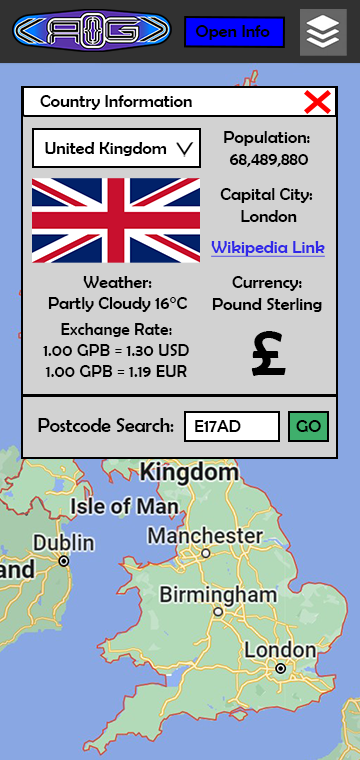
<style>
.page{position:relative;width:360px;height:760px;background:#d2d2d2}
.page>*{position:absolute;margin:0}
.t1{font:18px "BerlinSansFB-Reg";color:#000000}
.t2{font:18px "BerlinSansFB-Reg";color:#3128e8;text-decoration:underline}
.t3{font:17.4px "BerlinSansFB-Reg";color:#000000}
.t4{font:73.8px "BerlinSansFB-Reg";color:#000000}
.t5{font:19.7px "BerlinSansFB-Reg";color:#000000}
</style>
<div class="page">
<p class="t1" style="left:195px;top:25px;width:75px;height:15px">Open Info</p>
<p class="t1" style="left:40px;top:95px;width:152px;height:15px">Country Information</p>
<p class="t1" style="left:224px;top:131px;width:86px;height:36px;text-align:center">Population: <br>68,489,880</p>
<p class="t1" style="left:45px;top:142px;width:122px;height:14px">United Kingdom</p>
<p class="t1" style="left:220px;top:188px;width:93px;height:34px;text-align:center">Capital City: <br>London</p>
<p class="t2" style="left:211px;top:241px;width:114px;height:16px">Wikipedia Link</p>
<p class="t1" style="left:48px;top:276px;width:139px;height:36px;text-align:center">Weather:<br>Partly Cloudy 16°C</p>
<p class="t1" style="left:212px;top:276px;width:110px;height:36px;text-align:center">Currency:<br>Pound Sterling</p>
<p class="t3" style="left:43px;top:323px;width:146px;height:54px;text-align:center">Exchange Rate:<br>1.00 GPB = 1.30 USD<br>1.00 GPB = 1.19 EUR</p>
<p class="t4" style="left:251px;top:331px;width:35px;height:45px">£</p>
<p class="t5" style="left:38px;top:418px;width:136px;height:14px">Postcode Search:</p>
<p class="t1" style="left:195px;top:420px;width:46px;height:12px">E17AD</p>
<p class="t1" style="left:296px;top:420px;width:25px;height:12px">GO</p>
</div>
